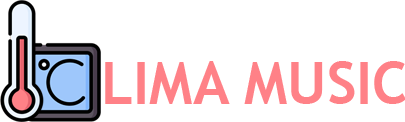
<style>
.page{position:relative;width:405px;height:122px;background:#ffffff}
.page>*{position:absolute;margin:0}
.t1{font:58.6px "TrebuchetMS-Bold";color:#ff8187}
</style>
<div class="page">
<p class="t1" style="left:105px;top:61px;width:301px;height:43px">LIMA MUSIC</p>
</div>
